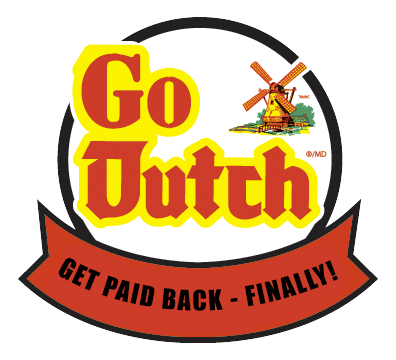
<style>
.page{position:relative;width:396px;height:360px;background:#ffffff}
.page>*{position:absolute;margin:0}
.t1{font:95px "StencilStd";letter-spacing:-0.025em;color:#cd3b29;font-weight:bold}
.t2{font:65px "StencilStd";letter-spacing:-0.025em;color:#cd3b29;font-weight:bold}
.t3{font:26px "Impact";letter-spacing:0.075em;color:#000000}
</style>
<div class="page">
<p class="t1" style="left:81px;top:53px;width:110px;height:76px">G<span class="t2">o</span></p>
<p class="t3" style="left:58px;top:258px;width:280px;height:53px;text-align:center">GET PAID BACK - FINALLY!</p>
</div>
